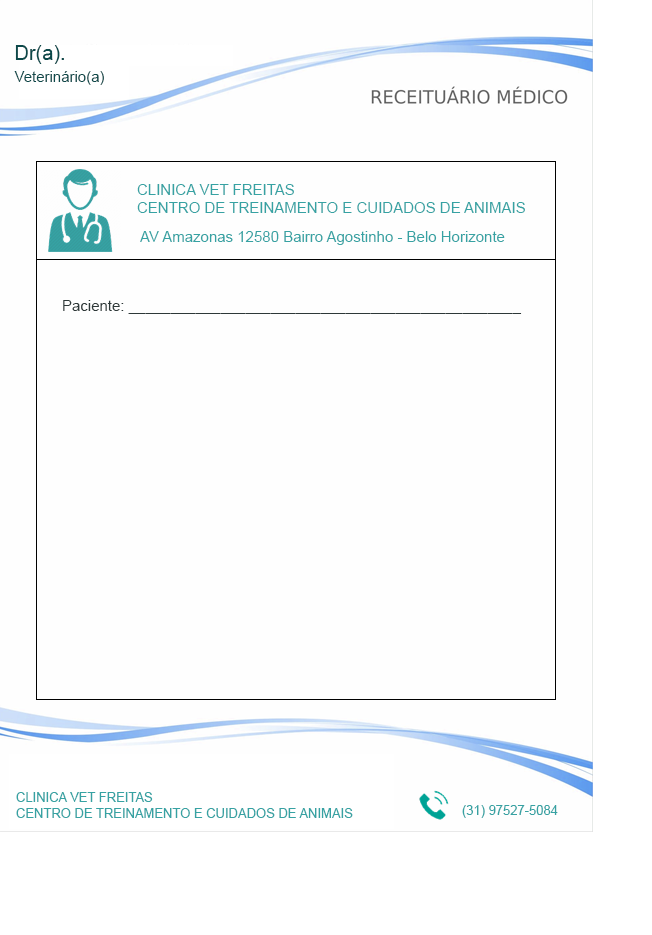
<style>
.page{position:relative;width:652px;height:935px;background:#fefefe}
.page>*{position:absolute;margin:0}
.t1{font:20px "ArialMT";color:#0c494a}
.t2{font:15px "ArialMT";color:#0c494a}
.t3{font:15px "ArialMT";color:#36a2a3}
.t4{font:15px "ArialMT";color:#2d3838}
.t5{font:13px "ArialMT";color:#36a2a3}
</style>
<div class="page">
<p class="t1" style="left:15px;top:45px;width:49px;height:19px">Dr(a).</p>
<p class="t2" style="left:14px;top:71px;width:90px;height:14px">Veterinário(a)</p>
<p class="t3" style="left:137px;top:184px;width:388px;height:29px">CLINICA VET FREITAS<br>CENTRO DE TREINAMENTO E CUIDADOS DE ANIMAIS</p>
<p class="t3" style="left:140px;top:231px;width:365px;height:14px">AV Amazonas 12580 Bairro Agostinho - Belo Horizonte</p>
<p class="t4" style="left:63px;top:300px;width:459px;height:14px">Paciente: _______________________________________________</p>
<p class="t5" style="left:16px;top:792px;width:337px;height:26px">CLINICA VET FREITAS<br>CENTRO DE TREINAMENTO E CUIDADOS DE ANIMAIS</p>
<p class="t5" style="left:462px;top:805px;width:96px;height:13px">(31) 97527-5084</p>
</div>
